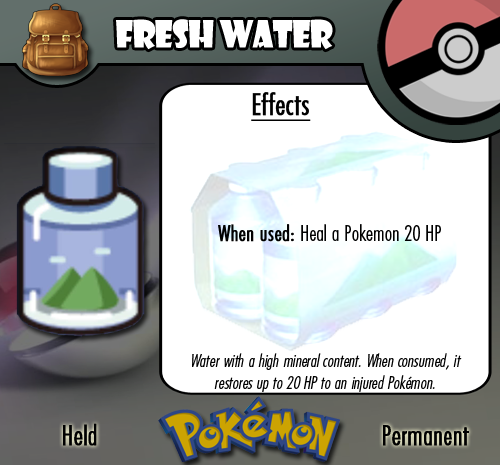
<style>
.page{position:relative;width:500px;height:465px;background:#ffffff}
.page>*{position:absolute;margin:0}
.t1{font:36.7px "ShowcardGothic-Reg";letter-spacing:-0.025em;color:#ffffff;scale:0.91 1}
.t2{font:22.2px "FuturaCondensedBQ-Light";color:#010101}
.t3{font:27.8px "FuturaCondensedBQ-Light";color:#010101;font-weight:bold}
.t4{font:30.6px "FuturaCondensedBQ-Light";color:#010101;font-weight:bold;text-decoration:underline}
.t5{font:22.2px "FuturaCondensedBQ-Light";color:#010101;font-weight:bold}
.t6{font:18.1px "FuturaCondensedBQ-Light";color:#010101;font-style:italic}
</style>
<div class="page">
<p class="t1" style="left:116px;top:19px;width:217px;height:31px">Fresh Water</p>
<p class="t2" style="left:218px;top:92px;width:223px;height:150px"><span class="t3">  </span><span class="t4">Effects<br><br><br><br></span><span class="t5">When used: </span>Heal a Pokemon 20 HP</p>
<p class="t6" style="left:192px;top:353px;width:270px;height:39px;text-align:center">Water with a high mineral content. When consumed, it restores up to 20 HP to an injured Pokémon.</p>
<p class="t3" style="left:63px;top:423px;width:34px;height:23px">Held</p>
<p class="t3" style="left:383px;top:425px;width:86px;height:21px">Permanent</p>
</div>
